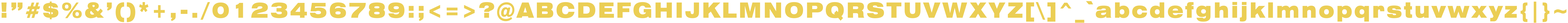
<style>
.page{position:relative;width:1568px;height:23px;background:#ffffff}
.page>*{position:absolute;margin:0}
.t1{font:21.2px "Swiss721BT-BlackExtended";letter-spacing:0.1em;color:#ebce54;scale:0.87 1}
.t2{font:21.2px "Swiss721BT-BlackExtended";letter-spacing:0.2em;color:#ebce54;scale:0.87 1}
.t3{font:21.2px "Swiss721BT-BlackExtended";letter-spacing:0.15em;color:#ebce54;scale:0.87 1}
.t4{font:21.2px "Swiss721BT-BlackExtended";color:#ebce54;scale:0.87 1}
</style>
<div class="page">
<p class="t1" style="left:1px;top:1px;width:1566px;height:22px">!”#$%&amp;’()*+,-./0123456789:;&lt;=&gt;?@ABCDEFGHIJKLMNOPQRSTU<span class="t2">VW</span><span class="t3">XY</span>Z[\<span class="t4">]^</span>_<span class="t4">`</span>abcdefghijklmnopqrstuv<span class="t3">wx</span>yz{|}~</p>
</div>
